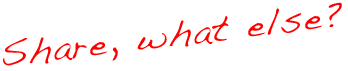
<style>
.page{position:relative;width:348px;height:71px;background:#ffffff}
.page>*{position:absolute;margin:0}
.t1{font:36px "Handwriting-Dakota";letter-spacing:0.05em;color:#ff0000}
</style>
<div class="page">
<p class="t1" style="left:3px;top:2px;width:339px;height:64px;rotate:-7deg">Share, what else?</p>
</div>
